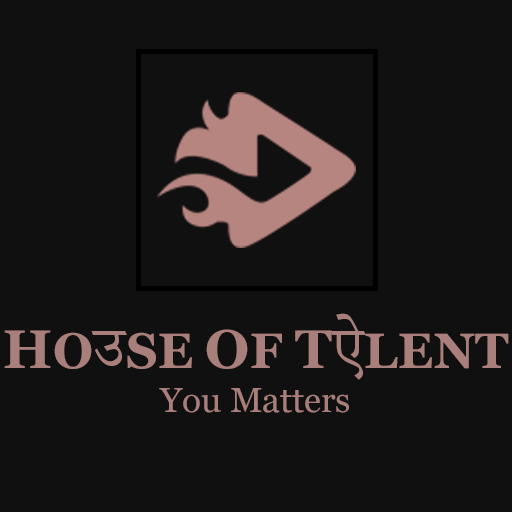
<style>
.page{position:relative;width:512px;height:512px;background:#101010}
.page>*{position:absolute;margin:0}
.t1{font:49.1px "Georgia-Bold";letter-spacing:0.01em;color:#a87f7b}
.t2{font:54.2px "Georgia-Bold";letter-spacing:0.01em;color:#a87f7b}
.t3{font:73.7px "AdobeDevanagari-Regular";letter-spacing:0.01em;color:#a87f7b}
.t4{font:34.8px "Georgia";color:#a87f7b}
</style>
<div class="page">
<p class="t1" style="left:4px;top:313px;width:505px;height:67px"><span class="t2">H</span>O<span class="t3">उ</span>SE <span class="t2">O</span>F <span class="t2">T</span><span class="t3">ऐ</span>LENT</p>
<p class="t4" style="left:159px;top:388px;width:190px;height:25px">You Matters</p>
</div>
